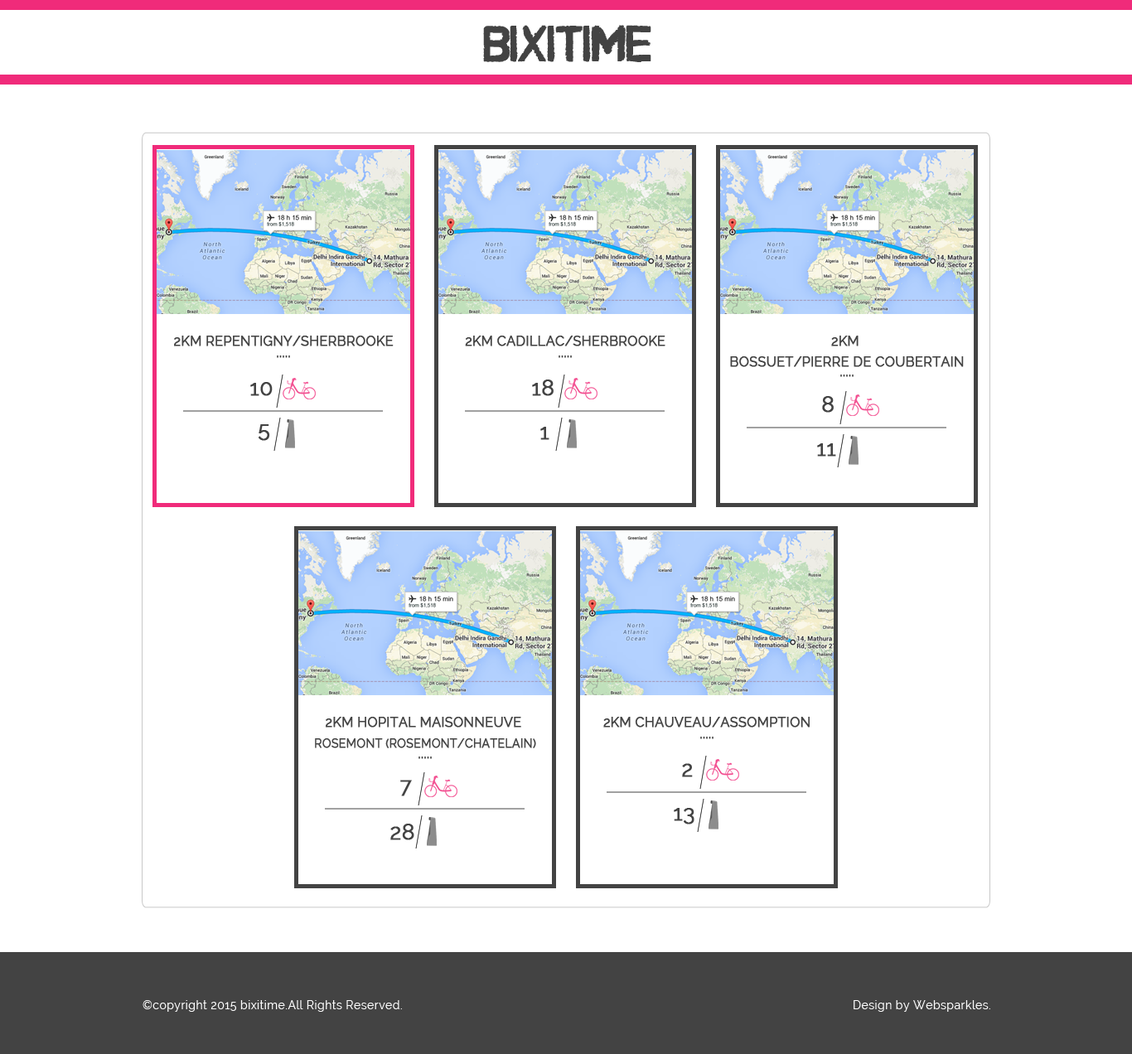
<style>
.page{position:relative;width:1132px;height:1054px;background:#ffffff}
.page>*{position:absolute;margin:0}
.t1{font:41px "CFNuclearWar-Regular";color:#434343;text-transform:uppercase;font-weight:bold}
.t2{font:13.3px "Raleway";color:#434343;text-transform:uppercase;font-weight:bold}
.t3{font:13.3px/20.7px "Raleway";color:#434343;text-transform:uppercase;font-weight:bold}
.t4{font:21.5px "Raleway";color:#434343;text-transform:uppercase;font-weight:bold}
.t5{font:11.6px/20.7px "Raleway";color:#434343;text-transform:uppercase;font-weight:bold}
.t6{font:11.6px "Raleway";letter-spacing:0.035em;color:#ffffff}
</style>
<div class="page">
<p class="t1" style="left:483px;top:25px;width:168px;height:37px">BixiTime</p>
<p class="t2" style="left:174px;top:336px;width:219px;height:10px">2km Repentigny/Sherbrooke</p>
<p class="t2" style="left:465px;top:336px;width:200px;height:10px">2km Cadillac/Sherbrooke</p>
<p class="t3" style="left:730px;top:336px;width:233px;height:31px;text-align:center">2km <br>Bossuet/Pierre de coubertain</p>
<p class="t2" style="left:277px;top:355px;width:13px;height:3px">.....</p>
<p class="t2" style="left:558px;top:355px;width:14px;height:3px">.....</p>
<p class="t2" style="left:840px;top:374px;width:13px;height:3px">.....</p>
<p class="t4" style="left:250px;top:382px;width:23px;height:14px">10</p>
<p class="t4" style="left:532px;top:379px;width:21px;height:17px">18</p>
<p class="t4" style="left:822px;top:396px;width:11px;height:17px">8</p>
<p class="t4" style="left:258px;top:424px;width:12px;height:17px">5</p>
<p class="t4" style="left:540px;top:427px;width:9px;height:13px">1</p>
<p class="t4" style="left:817px;top:443px;width:19px;height:13px">11</p>
<p class="t5" style="left:315px;top:717px;width:221px;height:31px;text-align:center"><span class="t3">2km Hopital Maisonneuve <br></span>Rosemont (Rosemont/Chatelain)</p>
<p class="t2" style="left:603px;top:717px;width:206px;height:10px">2km Chauveau/Assomption</p>
<p class="t2" style="left:700px;top:736px;width:13px;height:3px">.....</p>
<p class="t2" style="left:418px;top:756px;width:14px;height:3px">.....</p>
<p class="t4" style="left:682px;top:763px;width:11px;height:14px">2</p>
<p class="t4" style="left:400px;top:780px;width:12px;height:16px">7</p>
<p class="t4" style="left:674px;top:808px;width:20px;height:16px">13</p>
<p class="t4" style="left:390px;top:823px;width:24px;height:17px">28</p>
<p class="t6" style="left:142px;top:1000px;width:260px;height:11px">©copyright 2015 bixitime.All Rights Reserved.</p>
<p class="t6" style="left:853px;top:1000px;width:137px;height:11px">Design by Websparkles.</p>
</div>
